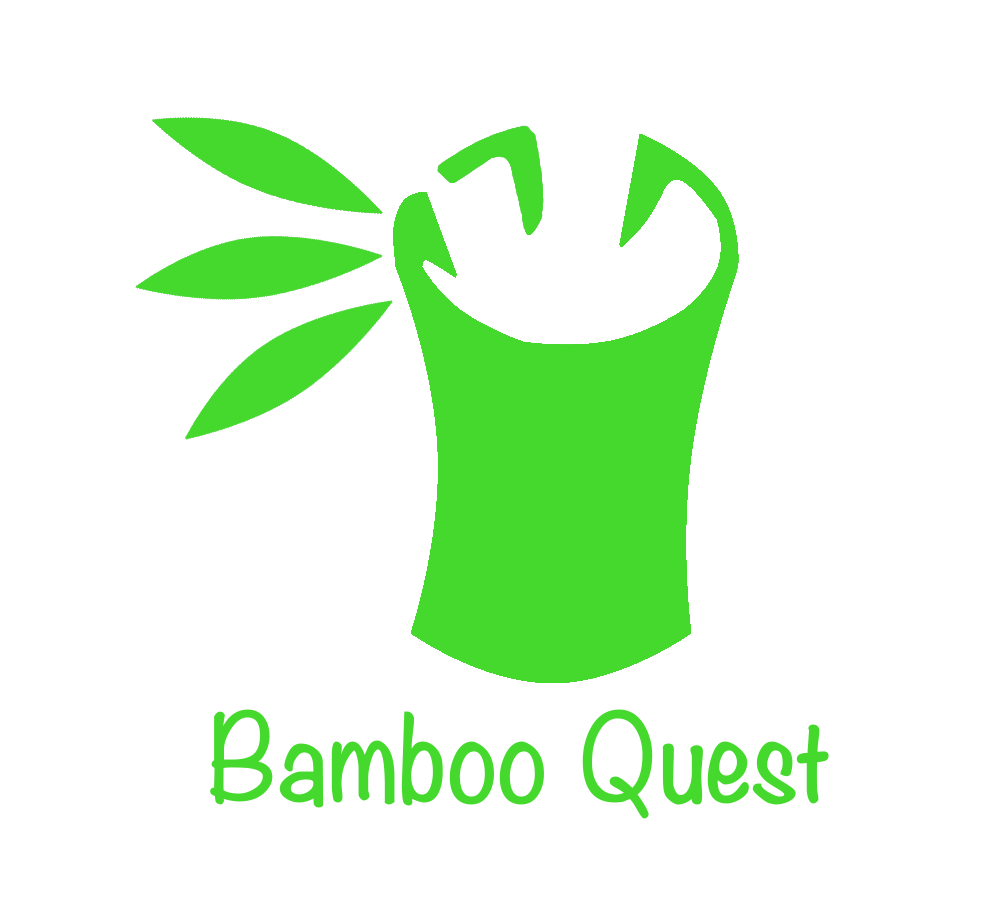
<style>
.page{position:relative;width:1000px;height:900px;background:#ffffff}
.page>*{position:absolute;margin:0}
.t1{font:104.2px "Noteworthy-Light";color:#45d92d;font-weight:bold}
</style>
<div class="page">
<p class="t1" style="left:210px;top:709px;width:619px;height:110px">Bamboo Quest</p>
</div>
